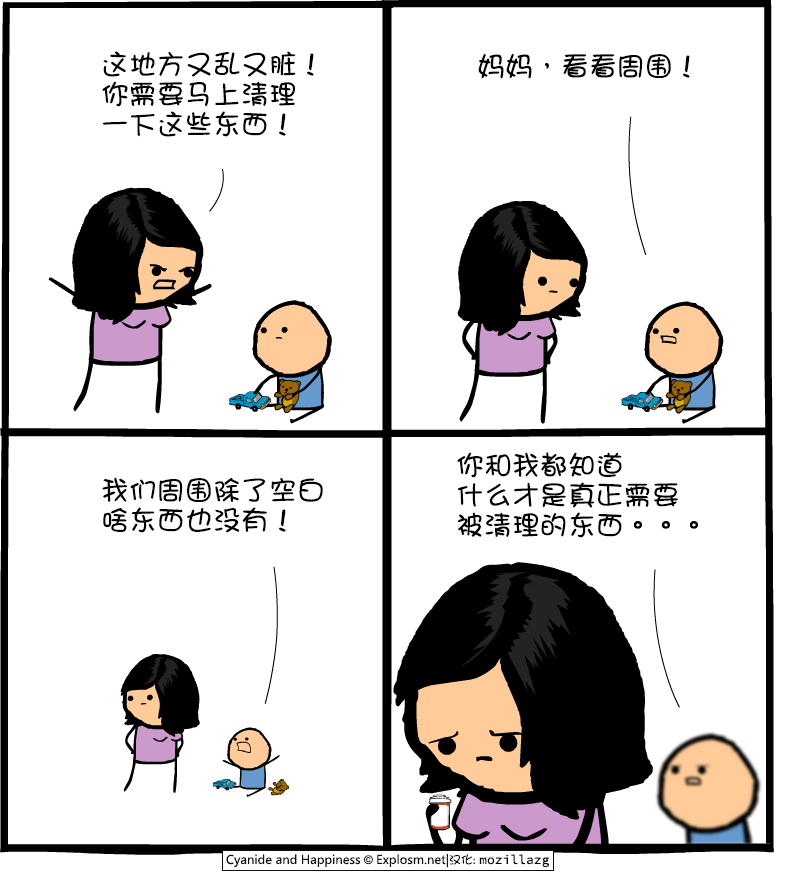
<style>
.page{position:relative;width:785px;height:875px;background:#ffffff}
.page>*{position:absolute;margin:0}
.t1{font:28px/30px "DFGirl";color:#000000}
.t2{font:28px "DFGirl";color:#000000}
</style>
<div class="page">
<p class="t1" style="left:102px;top:51px;width:212px;height:86px">这地方又乱又脏！<br>你需要马上清理<br>一下这些东西！</p>
<p class="t2" style="left:478px;top:53px;width:212px;height:26px">妈妈，看看周围！</p>
<p class="t1" style="left:457px;top:452px;width:241px;height:86px">你和我都知道<br>什么才是真正需要<br>被清理的东西。。。</p>
<p class="t1" style="left:102px;top:477px;width:221px;height:56px">我们周围除了空白<br>啥东西也没有！</p>
</div>
